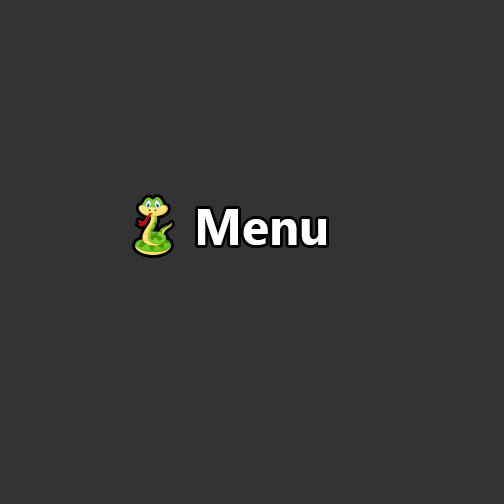
<style>
.page{position:relative;width:504px;height:504px;background:#333333}
.page>*{position:absolute;margin:0}
.t1{font:50px "SegoeUI-Bold";color:#ffffff}
</style>
<div class="page">
<p class="t1" style="left:198px;top:209px;width:128px;height:36px">Menu</p>
</div>
